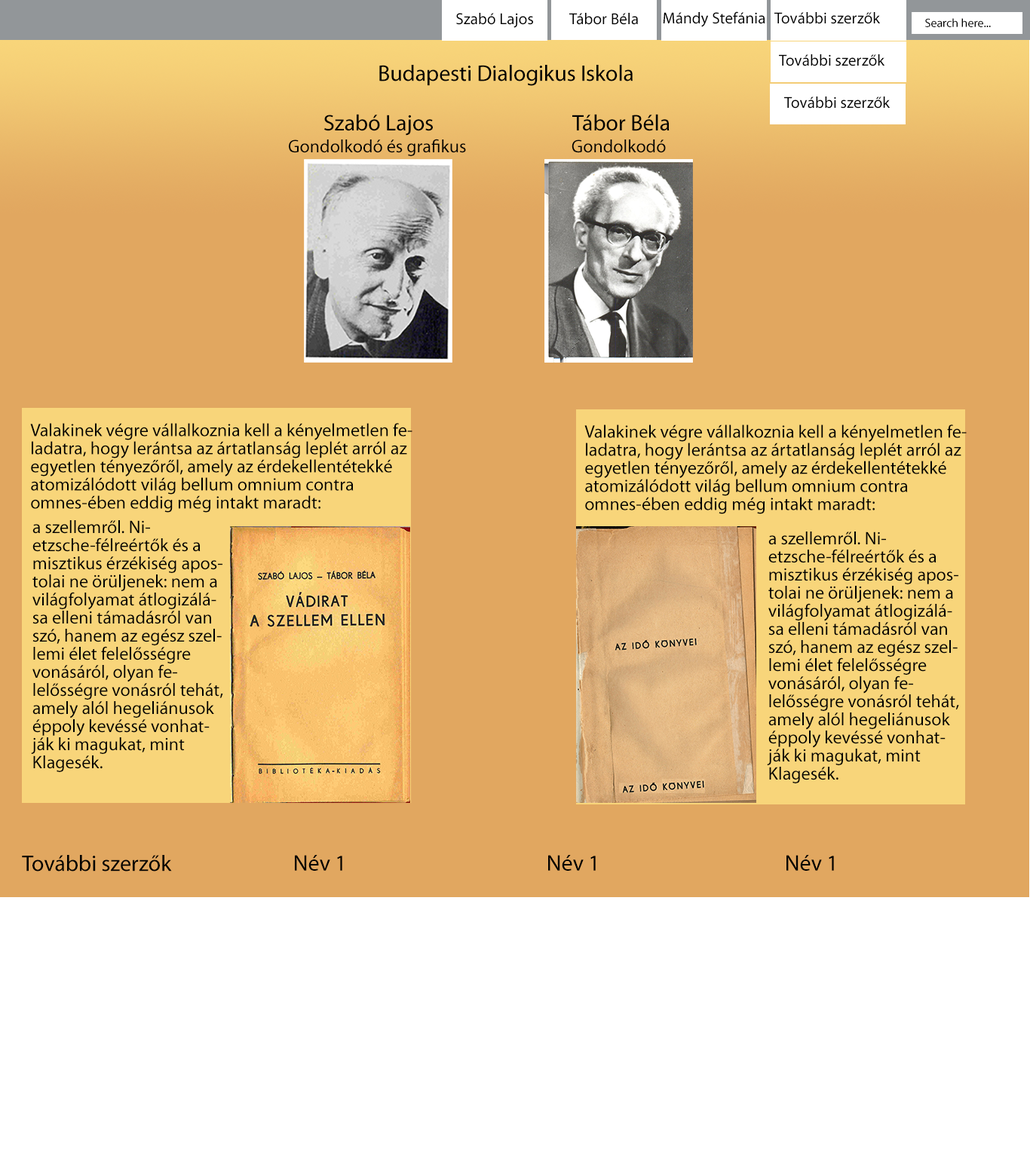
<style>
.page{position:relative;width:1030px;height:1158px;background:#e1a760}
.page>*{position:absolute;margin:0}
.t1{font:15.8px "MyriadPro-Regular";letter-spacing:0.005em;color:#000000}
.t2{font:12.1px "MyriadPro-Regular";color:#000000}
.t3{font:22.6px "MyriadPro-Regular";color:#000000}
.t4{font:18.1px "MyriadPro-Regular";color:#000000}
.t5{font:18.1px/18.1px "MyriadPro-Regular";color:#000000}
</style>
<div class="page">
<p class="t1" style="left:456px;top:13px;width:77px;height:15px">Szabó Lajos</p>
<p class="t1" style="left:569px;top:13px;width:69px;height:12px">Tábor Béla</p>
<p class="t1" style="left:663px;top:11px;width:102px;height:16px">Mándy Stefánia</p>
<p class="t1" style="left:774px;top:12px;width:107px;height:12px">További szerzők</p>
<p class="t2" style="left:925px;top:18px;width:66px;height:9px">Search here...</p>
<p class="t3" style="left:379px;top:65px;width:253px;height:21px">Budapesti Dialogikus Iskola</p>
<p class="t1" style="left:779px;top:54px;width:106px;height:12px">További szerzők</p>
<p class="t1" style="left:784px;top:96px;width:106px;height:13px">További szerzők</p>
<p class="t3" style="left:324px;top:114px;width:109px;height:22px">Szabó Lajos</p>
<p class="t3" style="left:572px;top:114px;width:97px;height:17px">Tábor Béla</p>
<p class="t4" style="left:289px;top:139px;width:177px;height:17px">Gondolkodó és grafikus</p>
<p class="t4" style="left:571px;top:139px;width:95px;height:14px">Gondolkodó</p>
<p class="t5" style="left:30px;top:423px;width:382px;height:90px">Valakinek végre vállalkoznia kell a kényelmetlen feladatra, hogy lerántsa az ártatlanság leplét arról az egyetlen tényezőről, amely az érdekellentétekké atomizálódott világ bellum omnium contra omnes-ében eddig még intakt maradt:</p>
<p class="t5" style="left:584px;top:424px;width:382px;height:90px">Valakinek végre vállalkoznia kell a kényelmetlen feladatra, hogy lerántsa az ártatlanság leplét arról az egyetlen tényezőről, amely az érdekellentétekké atomizálódott világ bellum omnium contra omnes-ében eddig még intakt maradt:</p>
<p class="t5" style="left:31px;top:520px;width:192px;height:252px">a szellemről. Nietzsche-félreértők és a misztikus érzékiség apostolai ne örüljenek: nem a világfolyamat átlogizálása elleni támadásról van szó, hanem az egész szellemi élet felelősségre vonásáról, olyan felelősségre vonásról tehát, amely alól hegeliánusok éppoly kevéssé vonhatják ki magukat, mint Klagesék.</p>
<p class="t5" style="left:767px;top:531px;width:192px;height:252px">a szellemről. Nietzsche-félreértők és a misztikus érzékiség apostolai ne örüljenek: nem a világfolyamat átlogizálása elleni támadásról van szó, hanem az egész szellemi élet felelősségre vonásáról, olyan felelősségre vonásról tehát, amely alól hegeliánusok éppoly kevéssé vonhatják ki magukat, mint Klagesék.</p>
<p class="t3" style="left:22px;top:855px;width:150px;height:16px">További szerzők</p>
<p class="t3" style="left:295px;top:855px;width:47px;height:16px">Név 1</p>
<p class="t3" style="left:548px;top:855px;width:48px;height:16px">Név 1</p>
<p class="t3" style="left:786px;top:855px;width:48px;height:16px">Név 1</p>
</div>
